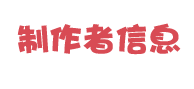
<style>
.page{position:relative;width:194px;height:89px;background:#ffffff}
.page>*{position:absolute;margin:0}
.t1{font:33.3px "DFPHaiBaoW12";letter-spacing:-0.005em;color:#d84b54}
</style>
<div class="page">
<p class="t1" style="left:17px;top:23px;width:164px;height:32px">制作者信息</p>
</div>
